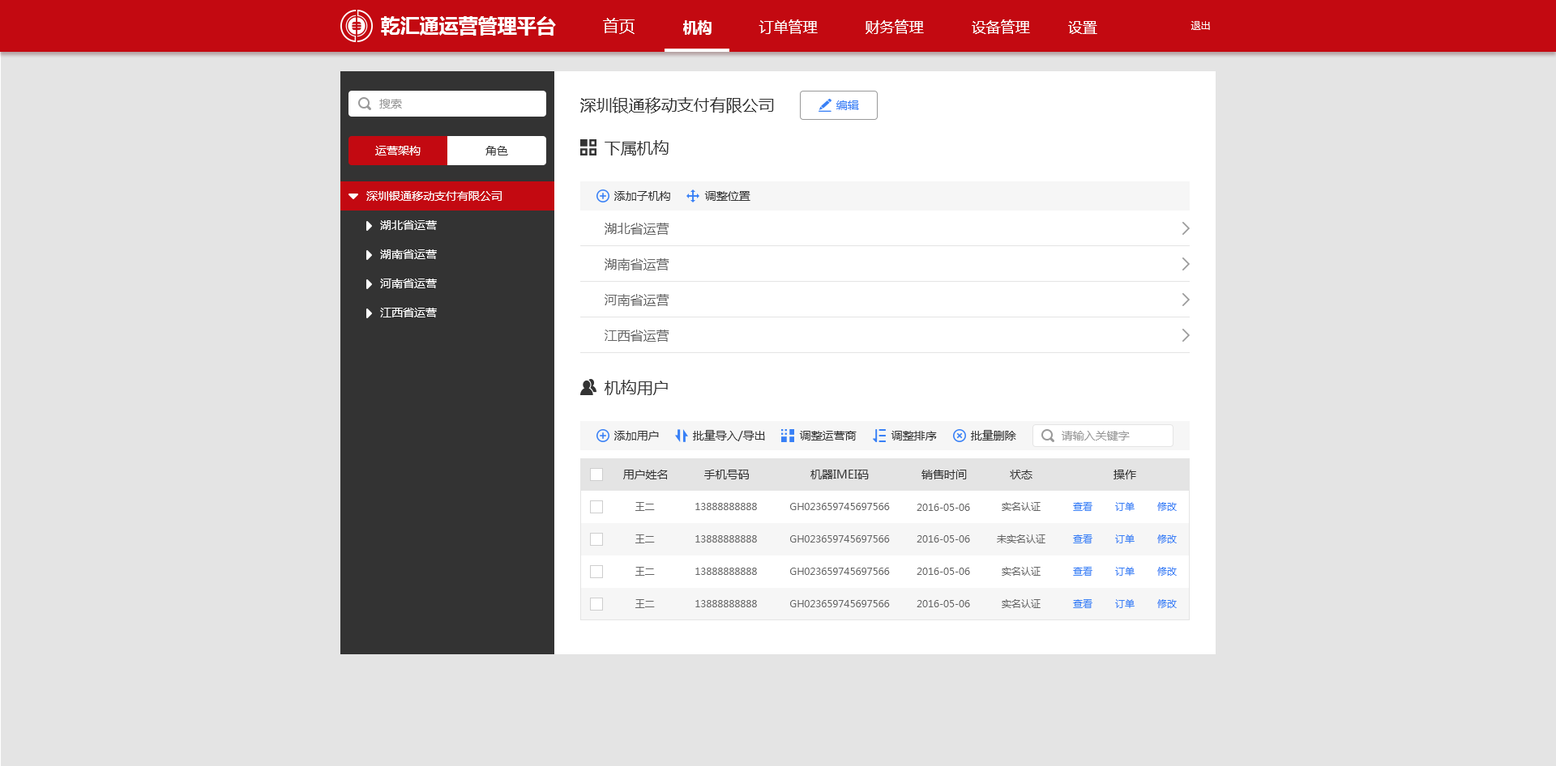
<style>
.page{position:relative;width:1556px;height:766px;background:#e4e4e4}
.page>*{position:absolute;margin:0}
.t1{font:19.4px "MicrosoftYaHei-Bold";color:#ffffff}
.t2{font:16.2px "MicrosoftYaHei";color:#ffffff}
.t3{font:14.6px "MicrosoftYaHei-Bold";color:#ffffff}
.t4{font:14.6px "MicrosoftYaHei";color:#ffffff}
.t5{font:9.7px "MicrosoftYaHei";color:#ffffff}
.t6{font:11.3px "MicrosoftYaHei";color:#999999}
.t7{font:16.2px "MicrosoftYaHei";color:#333333}
.t8{font:11.3px "MicrosoftYaHei";color:#3880f6}
.t9{font:11.3px "MicrosoftYaHei";color:#ffffff}
.t10{font:11.3px "MicrosoftYaHei";color:#333333}
.t11{font:13px "MicrosoftYaHei";color:#666666}
.t12{font:9.7px "MicrosoftYaHei";color:#666666}
.t13{font:9.7px "MicrosoftYaHei";color:#3880f6}
</style>
<div class="page">
<p class="t1" style="left:381px;top:16px;width:175px;height:20px">乾汇通运营管理平台</p>
<p class="t2" style="left:603px;top:18px;width:31px;height:16px">首页</p>
<p class="t3" style="left:683px;top:20px;width:28px;height:15px">机构</p>
<p class="t4" style="left:758px;top:19px;width:60px;height:15px">订单管理</p>
<p class="t4" style="left:865px;top:19px;width:59px;height:15px">财务管理</p>
<p class="t4" style="left:971px;top:19px;width:59px;height:15px">设备管理</p>
<p class="t4" style="left:1068px;top:21px;width:29px;height:13px">设置</p>
<p class="t5" style="left:1190px;top:21px;width:20px;height:9px">退出</p>
<p class="t6" style="left:379px;top:99px;width:23px;height:10px">搜索</p>
<p class="t7" style="left:580px;top:97px;width:194px;height:16px">深圳银通移动支付有限公司</p>
<p class="t8" style="left:836px;top:100px;width:23px;height:10px">编辑</p>
<p class="t9" style="left:375px;top:146px;width:46px;height:10px">运营架构</p>
<p class="t10" style="left:485px;top:146px;width:23px;height:10px">角色</p>
<p class="t7" style="left:604px;top:140px;width:64px;height:16px">下属机构</p>
<p class="t9" style="left:366px;top:191px;width:136px;height:10px">深圳银通移动支付有限公司</p>
<p class="t10" style="left:614px;top:191px;width:56px;height:10px">添加子机构</p>
<p class="t10" style="left:704px;top:191px;width:46px;height:10px">调整位置</p>
<p class="t9" style="left:380px;top:220px;width:57px;height:10px">湖北省运营</p>
<p class="t11" style="left:604px;top:223px;width:65px;height:12px">湖北省运营</p>
<p class="t9" style="left:380px;top:250px;width:57px;height:9px">湖南省运营</p>
<p class="t11" style="left:604px;top:258px;width:65px;height:13px">湖南省运营</p>
<p class="t9" style="left:380px;top:279px;width:57px;height:9px">河南省运营</p>
<p class="t11" style="left:604px;top:294px;width:65px;height:12px">河南省运营</p>
<p class="t9" style="left:380px;top:308px;width:57px;height:10px">江西省运营</p>
<p class="t11" style="left:604px;top:330px;width:65px;height:12px">江西省运营</p>
<p class="t7" style="left:604px;top:380px;width:64px;height:15px">机构用户</p>
<p class="t10" style="left:614px;top:431px;width:45px;height:10px">添加用户</p>
<p class="t10" style="left:693px;top:430px;width:72px;height:12px">批量导入/导出</p>
<p class="t10" style="left:799px;top:431px;width:57px;height:10px">调整运营商</p>
<p class="t10" style="left:890px;top:431px;width:47px;height:10px">调整排序</p>
<p class="t10" style="left:971px;top:430px;width:45px;height:11px">批量删除</p>
<p class="t6" style="left:1061px;top:431px;width:68px;height:10px">请输入关键字</p>
<p class="t10" style="left:623px;top:470px;width:45px;height:10px">用户姓名</p>
<p class="t10" style="left:704px;top:470px;width:45px;height:10px">手机号码</p>
<p class="t10" style="left:810px;top:470px;width:59px;height:10px">机器IMEI码</p>
<p class="t10" style="left:921px;top:470px;width:46px;height:10px">销售时间</p>
<p class="t10" style="left:1010px;top:470px;width:22px;height:10px">状态</p>
<p class="t10" style="left:1113px;top:470px;width:23px;height:10px">操作</p>
<p class="t12" style="left:635px;top:502px;width:20px;height:9px">王二</p>
<p class="t12" style="left:695px;top:503px;width:62px;height:7px">13888888888</p>
<p class="t12" style="left:790px;top:503px;width:100px;height:7px">GH023659745697566</p>
<p class="t12" style="left:916px;top:504px;width:54px;height:7px">2016-05-06</p>
<p class="t12" style="left:1001px;top:502px;width:39px;height:9px">实名认证</p>
<p class="t13" style="left:1073px;top:502px;width:19px;height:9px">查看</p>
<p class="t13" style="left:1115px;top:502px;width:19px;height:9px">订单</p>
<p class="t13" style="left:1157px;top:502px;width:19px;height:9px">修改</p>
<p class="t12" style="left:635px;top:535px;width:20px;height:9px">王二</p>
<p class="t12" style="left:695px;top:536px;width:62px;height:7px">13888888888</p>
<p class="t12" style="left:790px;top:536px;width:100px;height:7px">GH023659745697566</p>
<p class="t12" style="left:916px;top:536px;width:54px;height:7px">2016-05-06</p>
<p class="t12" style="left:997px;top:535px;width:48px;height:9px">未实名认证</p>
<p class="t13" style="left:1073px;top:535px;width:19px;height:9px">查看</p>
<p class="t13" style="left:1115px;top:535px;width:19px;height:9px">订单</p>
<p class="t13" style="left:1157px;top:535px;width:19px;height:9px">修改</p>
<p class="t12" style="left:635px;top:567px;width:20px;height:9px">王二</p>
<p class="t12" style="left:695px;top:568px;width:62px;height:7px">13888888888</p>
<p class="t12" style="left:790px;top:568px;width:100px;height:7px">GH023659745697566</p>
<p class="t12" style="left:916px;top:568px;width:54px;height:7px">2016-05-06</p>
<p class="t12" style="left:1001px;top:567px;width:39px;height:9px">实名认证</p>
<p class="t13" style="left:1073px;top:567px;width:19px;height:9px">查看</p>
<p class="t13" style="left:1115px;top:567px;width:19px;height:9px">订单</p>
<p class="t13" style="left:1157px;top:567px;width:19px;height:9px">修改</p>
<p class="t12" style="left:635px;top:600px;width:20px;height:9px">王二</p>
<p class="t12" style="left:695px;top:600px;width:62px;height:8px">13888888888</p>
<p class="t12" style="left:790px;top:600px;width:100px;height:8px">GH023659745697566</p>
<p class="t12" style="left:916px;top:600px;width:54px;height:8px">2016-05-06</p>
<p class="t12" style="left:1001px;top:600px;width:39px;height:9px">实名认证</p>
<p class="t13" style="left:1073px;top:600px;width:19px;height:9px">查看</p>
<p class="t13" style="left:1115px;top:600px;width:19px;height:9px">订单</p>
<p class="t13" style="left:1157px;top:600px;width:19px;height:9px">修改</p>
</div>
